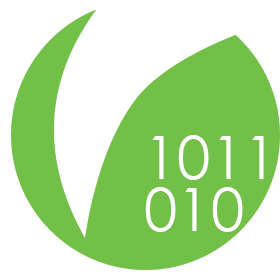
<style>
.page{position:relative;width:280px;height:280px;background:#ffffff}
.page>*{position:absolute;margin:0}
.t1{font:60px "CenturyGothic";color:#ffffff}
</style>
<div class="page">
<p class="t1" style="left:152px;top:135px;width:112px;height:45px">1011</p>
<p class="t1" style="left:145px;top:187px;width:98px;height:45px">010</p>
</div>
